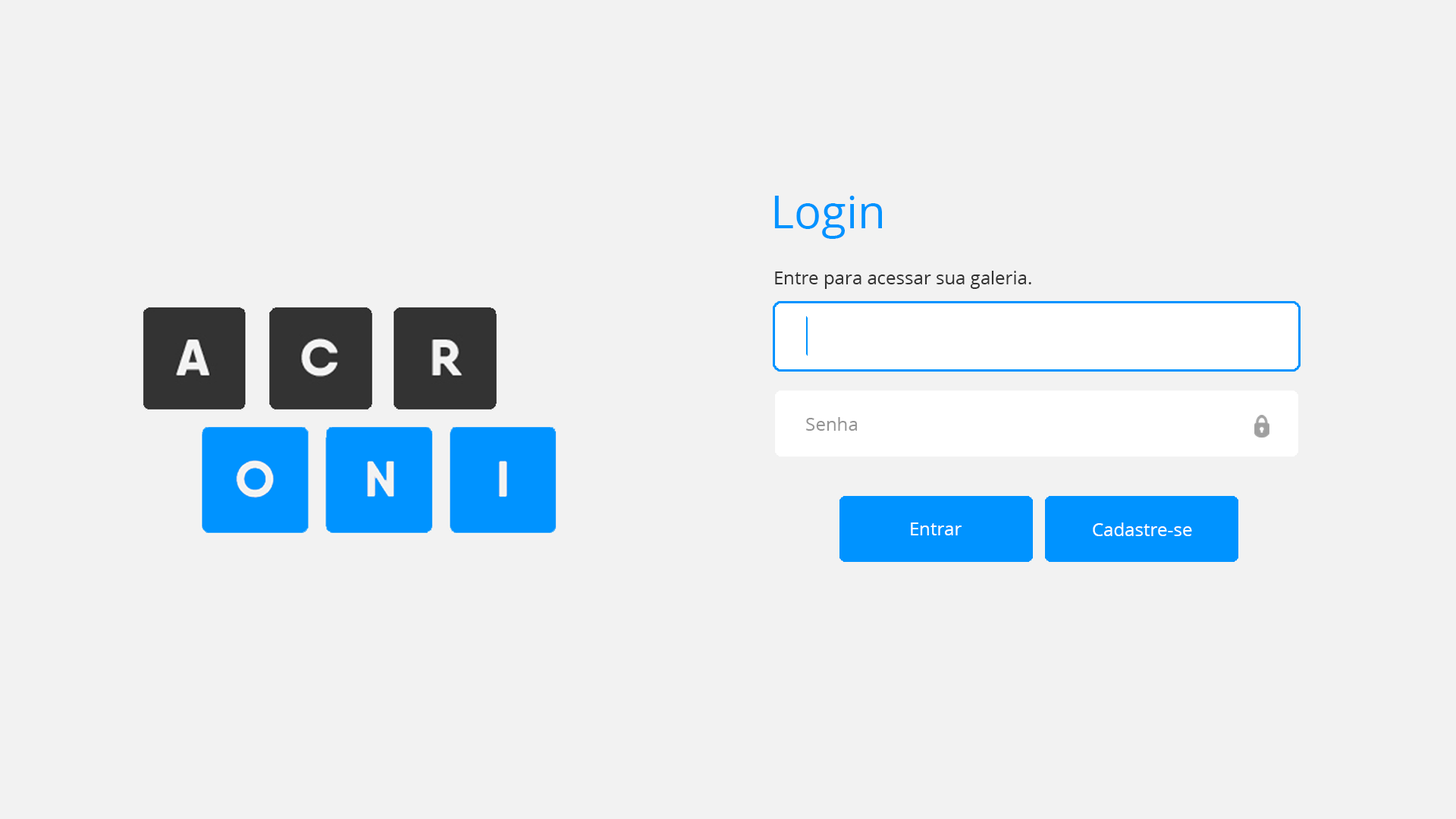
<style>
.page{position:relative;width:1456px;height:819px;background:#f2f2f2}
.page>*{position:absolute;margin:0}
.t1{font:45.5px "OpenSans";color:#0093ff}
.t2{font:18.2px "OpenSans";color:#333333}
.t3{font:18.2px "OpenSans";color:#959595}
.t4{font:18.2px "OpenSans";color:#ffffff}
</style>
<div class="page">
<p class="t1" style="left:774px;top:196px;width:108px;height:43px">Login</p>
<p class="t2" style="left:775px;top:271px;width:256px;height:18px">Entre para acessar sua galeria.</p>
<p class="t3" style="left:806px;top:417px;width:51px;height:14px">Senha</p>
<p class="t4" style="left:911px;top:522px;width:51px;height:13px">Entrar</p>
<p class="t4" style="left:1093px;top:522px;width:99px;height:14px">Cadastre-se</p>
</div>
